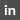
<style>
.page{position:relative;width:20px;height:20px;background:#4f4f4f}
.page>*{position:absolute;margin:0}
.t1{font:15px "Corbel-Bold";color:#ffffff}
</style>
<div class="page">
<p class="t1" style="left:4px;top:5px;width:12px;height:10px">in</p>
</div>
